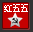
<style>
.page{position:relative;width:33px;height:32px;background:#c50000}
.page>*{position:absolute;margin:0}
.t1{font:10.4px "SimSun";letter-spacing:-0.25em;color:#ffffff}
</style>
<div class="page">
<p class="t1" style="left:4px;top:4px;width:24px;height:8px">红五五</p>
</div>
